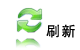
<style>
.page{position:relative;width:80px;height:50px;background:#ffffff}
.page>*{position:absolute;margin:0}
.t1{font:14px "SimHei";letter-spacing:0.1em;color:#000000}
</style>
<div class="page">
<p class="t1" style="left:46px;top:24px;width:29px;height:14px">刷新</p>
</div>
